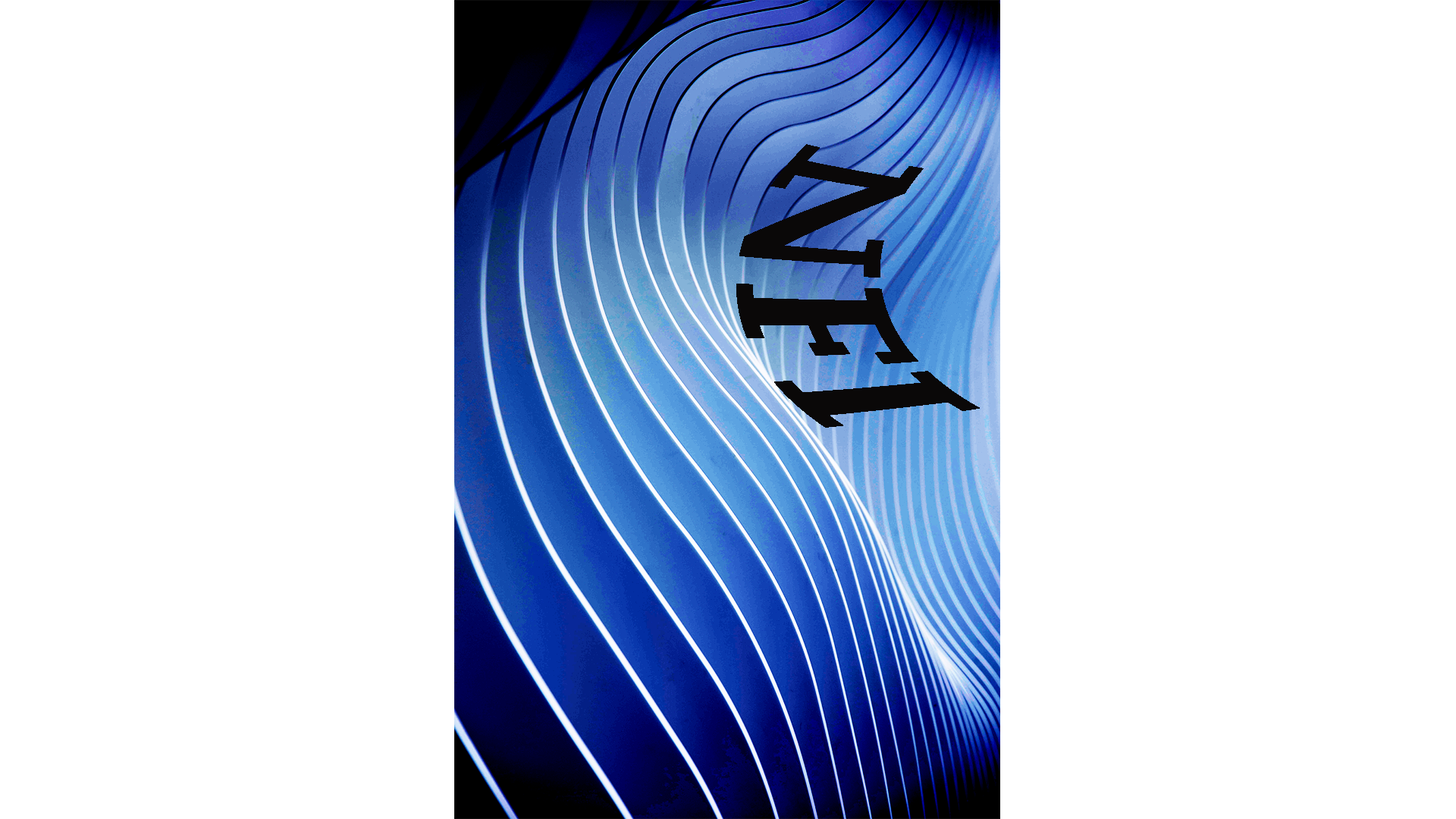
<style>
.page{position:relative;width:1456px;height:819px;background:#ffffff}
.page>*{position:absolute;margin:0}
.t1{font:227.5px "LucidaFax-Demi";color:#0a0808;font-style:italic;scale:0.53 1}
</style>
<div class="page">
<p class="t1" style="left:736px;top:144px;width:244px;height:284px;rotate:84deg">NFI</p>
</div>
